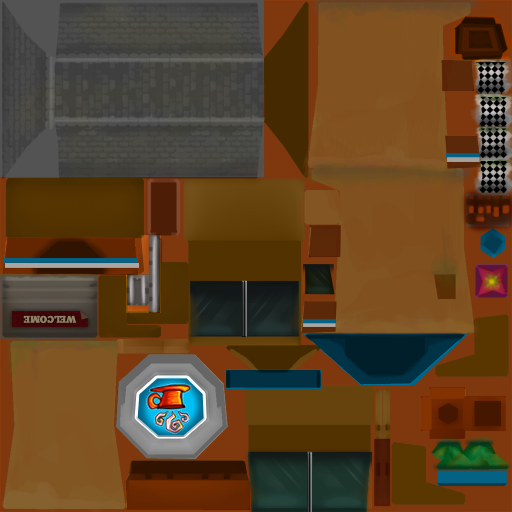
<style>
.page{position:relative;width:512px;height:512px}
.page>*{position:absolute;margin:0}
.t1{font:9.7px "ChunkFive-Roman";color:#8f8163}
</style>
<div class="page">
<p class="t1" style="left:23px;top:315px;width:54px;height:9px;rotate:180deg">WELCOME</p>
</div>
